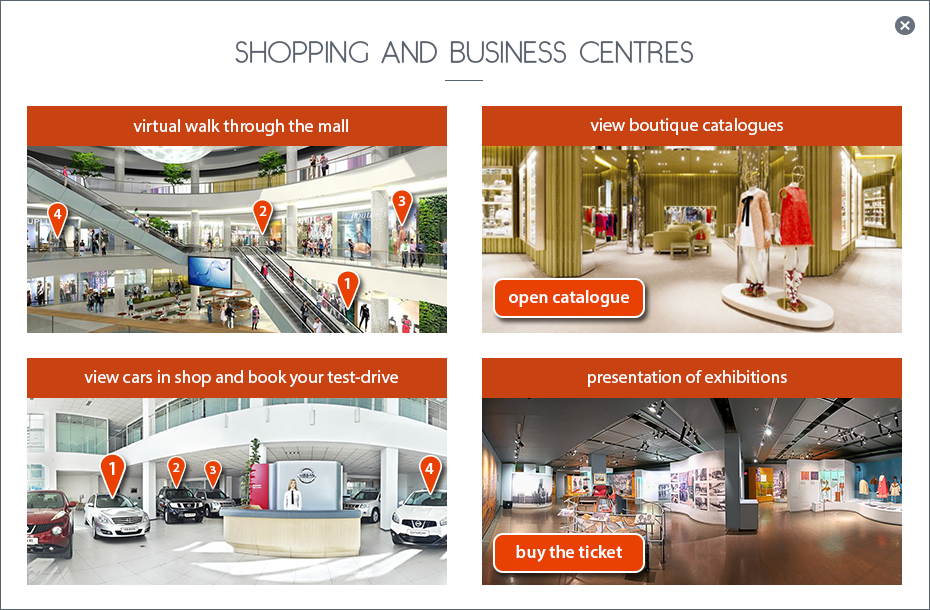
<style>
.page{position:relative;width:930px;height:610px;background:#ffffff}
.page>*{position:absolute;margin:0}
.t1{font:30px "GardensC";color:#59626f;text-transform:uppercase}
.t2{font:18.2px "MyriadPro-Regular";color:#ffffff}
.t3{font:18px "MyriadPro-Regular";color:#ffffff}
.t4{font:15.2px "MyriadPro-Semibold";color:#ffffff}
.t5{font:15.2px "MyriadPro-Semibold";color:#ffffff;scale:0.96 1}
.t6{font:14.8px "MyriadPro-Semibold";color:#ffffff}
.t7{font:16.5px "MyriadPro-Semibold";color:#ffffff}
.t8{font:18px "MyriadPro-Semibold";color:#ffffff}
.t9{font:18.9px "MyriadPro-Semibold";color:#ffffff}
.t10{font:13.6px "MyriadPro-Semibold";color:#ffffff}
.t11{font:11.9px "MyriadPro-Semibold";color:#ffffff;scale:1.06 1}
</style>
<div class="page">
<p class="t1" style="left:235px;top:40px;width:459px;height:24px">Shopping and business centres</p>
<p class="t2" style="left:133px;top:119px;width:215px;height:17px">virtual walk through the mall</p>
<p class="t3" style="left:590px;top:118px;width:193px;height:17px">view boutique catalogues</p>
<p class="t4" style="left:398px;top:196px;width:8px;height:10px">3</p>
<p class="t5" style="left:54px;top:209px;width:8px;height:10px">4</p>
<p class="t6" style="left:259px;top:206px;width:8px;height:10px">2</p>
<p class="t7" style="left:344px;top:278px;width:6px;height:11px">1</p>
<p class="t8" style="left:509px;top:290px;width:120px;height:17px">open catalogue</p>
<p class="t2" style="left:84px;top:370px;width:314px;height:17px">view cars in shop and book your test-drive</p>
<p class="t2" style="left:588px;top:370px;width:199px;height:17px">presentation of exhibitions</p>
<p class="t9" style="left:109px;top:462px;width:6px;height:13px">1</p>
<p class="t10" style="left:173px;top:463px;width:7px;height:9px">2</p>
<p class="t11" style="left:210px;top:466px;width:6px;height:8px">3</p>
<p class="t7" style="left:425px;top:463px;width:9px;height:11px">4</p>
<p class="t8" style="left:516px;top:545px;width:106px;height:17px">buy the ticket</p>
</div>
